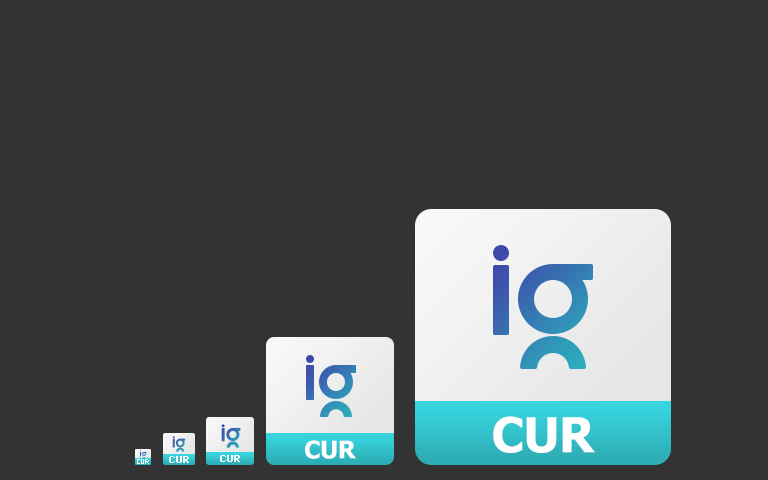
<style>
.page{position:relative;width:768px;height:480px;background:#333333}
.page>*{position:absolute;margin:0}
.t1{font:48px "Tahoma-Bold";color:#ffffff}
.t2{font:24px "Tahoma-Bold";color:#ffffff}
.t3{font:10px "Tahoma-Bold";color:#ffffff}
</style>
<div class="page">
<p class="t1" style="left:493px;top:416px;width:102px;height:37px">CUR</p>
<p class="t2" style="left:305px;top:440px;width:51px;height:19px">CUR</p>
<p class="t3" style="left:169px;top:456px;width:20px;height:7px">CUR</p>
<p class="t3" style="left:220px;top:455px;width:20px;height:7px">CUR</p>
</div>
